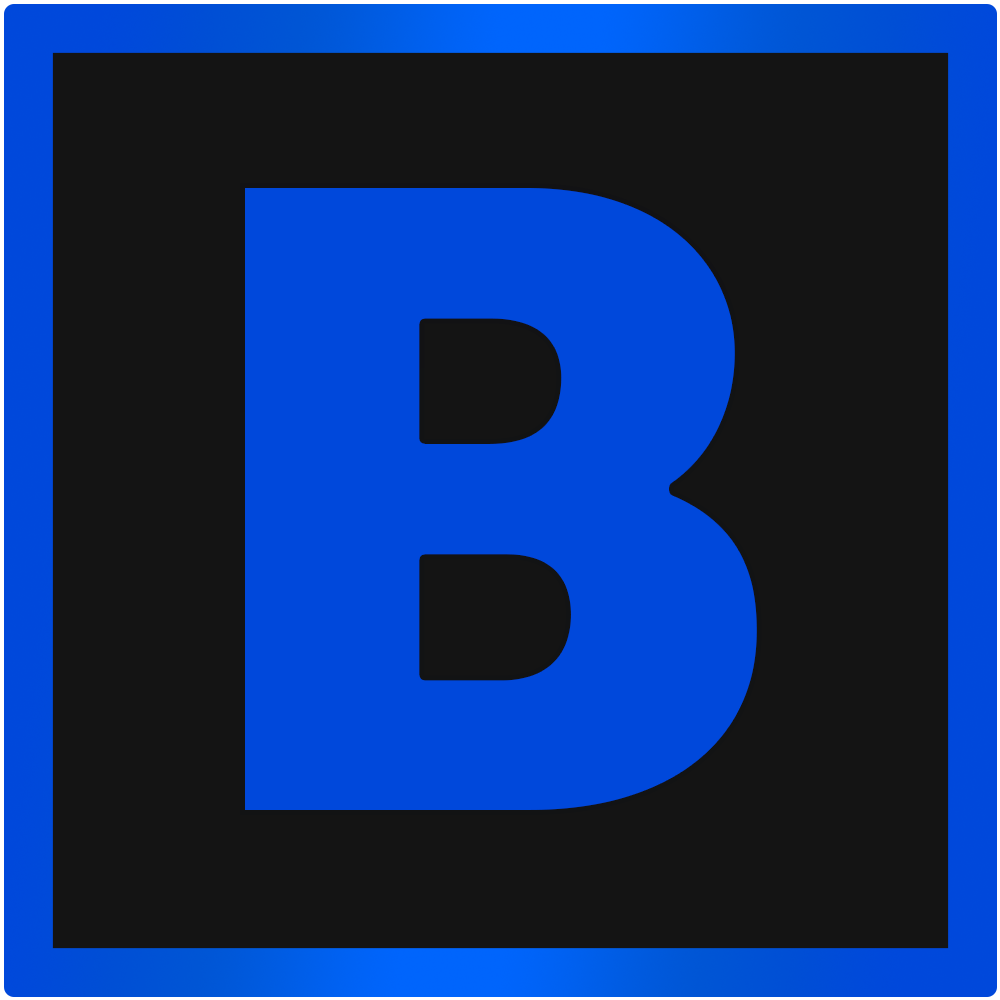
<style>
.page{position:relative;width:1000px;height:1000px;background:#141414}
.page>*{position:absolute;margin:0}
.t1{font:877.8px "Quatro-Black";letter-spacing:0.01em;color:#0048db}
</style>
<div class="page">
<p class="t1" style="left:240px;top:183px;width:522px;height:632px">B</p>
</div>
